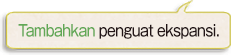
<style>
.page{position:relative;width:231px;height:55px;background:#f4ede5}
.page>*{position:absolute;margin:0}
.t1{font:16px "GothicMB101Pro-Medium";letter-spacing:-0.04em;color:#221517;scale:0.8 1}
.t2{font:16px "GothicMB101Pro-Medium";letter-spacing:-0.04em;color:#61a856;scale:0.8 1}
</style>
<div class="page">
<p class="t1" style="left:18px;top:24px;width:201px;height:15px"><span class="t2">Tambahkan</span> penguat ekspansi.</p>
</div>
